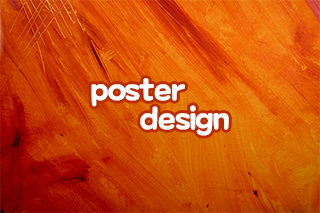
<style>
.page{position:relative;width:320px;height:213px}
.page>*{position:absolute;margin:0}
.t1{font:30px "MaplestoryBold";letter-spacing:-0.025em;color:#ffffff}
</style>
<div class="page">
<p class="t1" style="left:91px;top:78px;width:94px;height:29px">poster</p>
<p class="t1" style="left:140px;top:105px;width:89px;height:31px">design</p>
</div>
